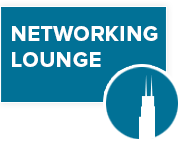
<style>
.page{position:relative;width:180px;height:150px;background:#017196}
.page>*{position:absolute;margin:0}
.t1{font:26.2px/26.7px "ProximaNova-Bold";color:#ffffff;font-variant:small-caps}
</style>
<div class="page">
<p class="t1" style="left:12px;top:26px;width:146px;height:41px">networking<br>lounge</p>
</div>
